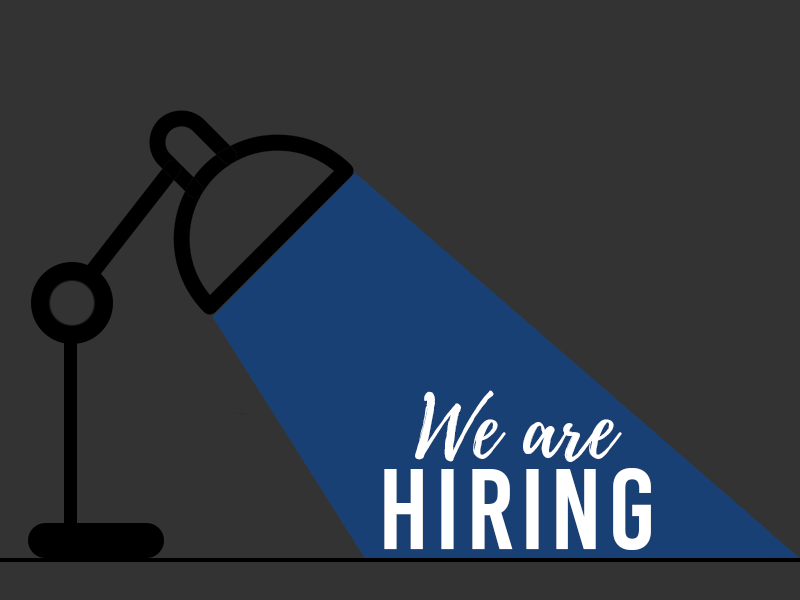
<style>
.page{position:relative;width:800px;height:600px;background:#333333}
.page>*{position:absolute;margin:0}
.t1{font:85px "Playlist-Script";color:#ffffff}
.t2{font:113.4px "BebasKai";letter-spacing:0.05em;color:#ffffff}
</style>
<div class="page">
<p class="t1" style="left:415px;top:390px;width:207px;height:72px">We are</p>
<p class="t2" style="left:384px;top:468px;width:267px;height:82px">HIRING</p>
</div>
